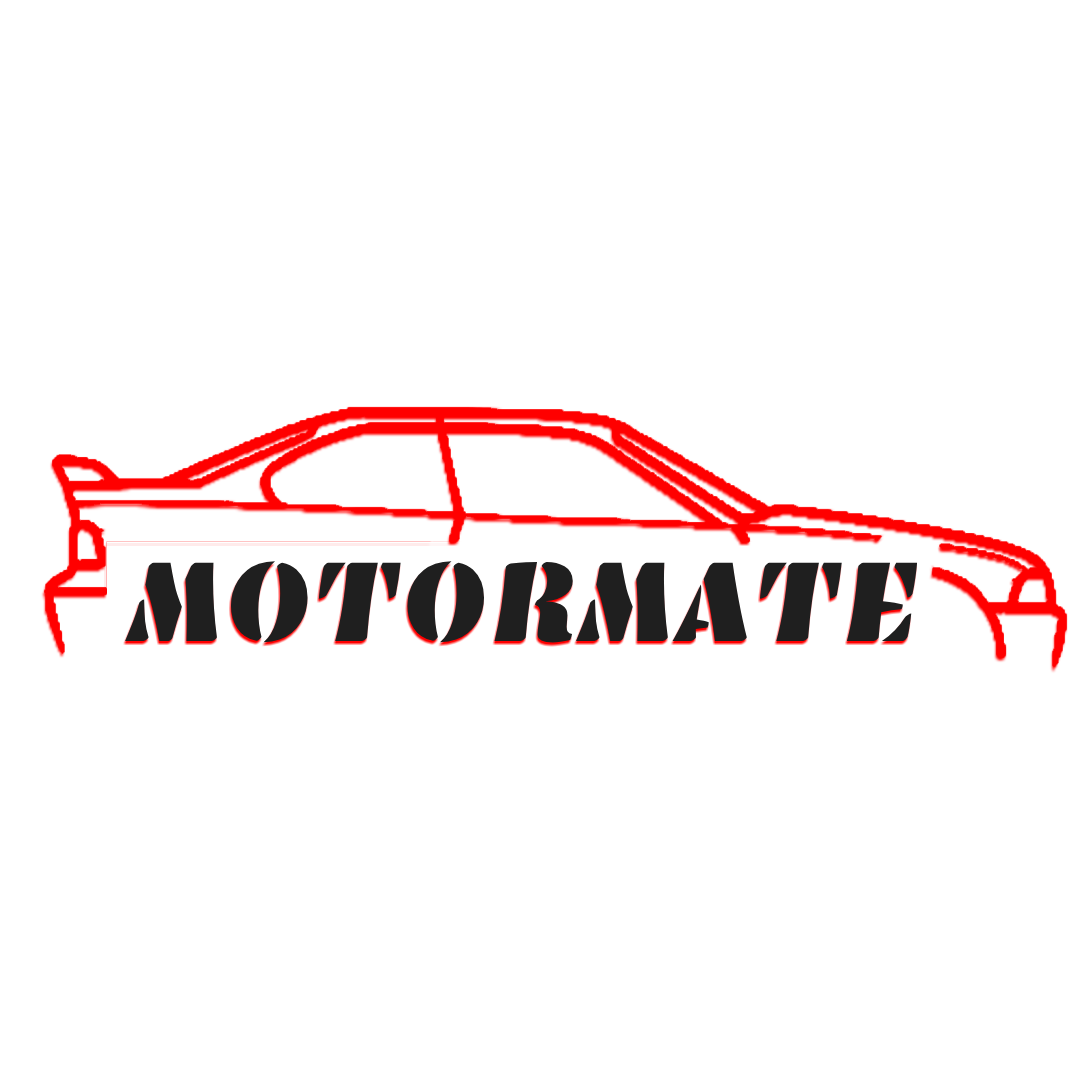
<style>
.page{position:relative;width:1080px;height:1080px;background:#ffffff}
.page>*{position:absolute;margin:0}
.t1{font:117.7px "EmblemaOne-Regular";color:#1f1f1f}
</style>
<div class="page">
<p class="t1" style="left:125px;top:561px;width:792px;height:82px">MOTORMATE</p>
</div>
